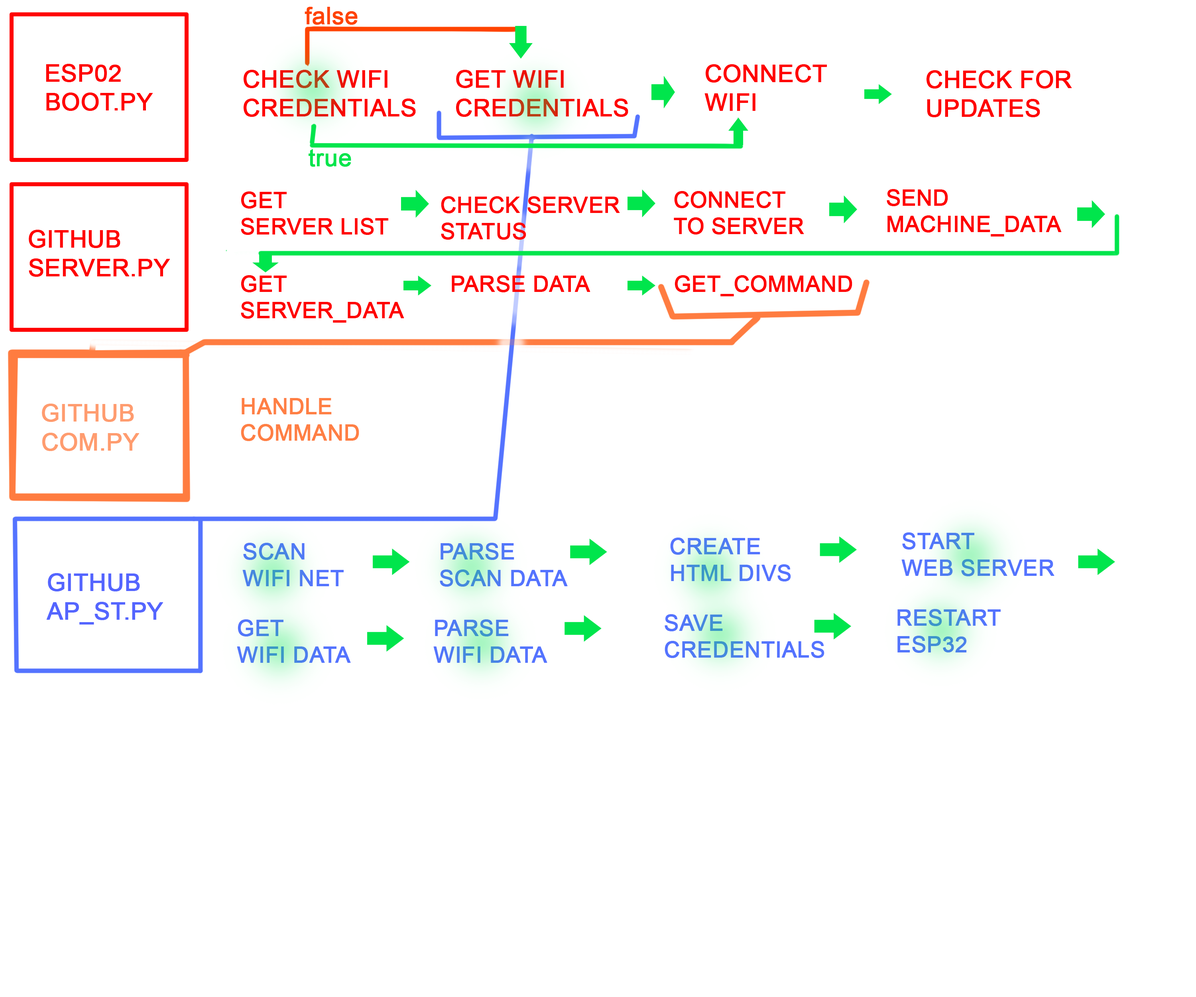
<style>
.page{position:relative;width:1196px;height:997px;background:#ffffff}
.page>*{position:absolute;margin:0}
.t1{font:23.9px "ArialMT";color:#ff4300;font-weight:bold}
.t2{font:23.9px/28.7px "ArialMT";color:#ff0000;font-weight:bold}
.t3{font:23.9px "ArialMT";color:#00e54c;font-weight:bold}
.t4{font:21.9px/26.3px "ArialMT";color:#ff0000;font-weight:bold}
.t5{font:21.9px "ArialMT";color:#ff0000;font-weight:bold}
.t6{font:21.9px/26.3px "ArialMT";color:#ff7f44;font-weight:bold}
.t7{font:23.9px/28.7px "ArialMT";color:#ff9c6f;font-weight:bold}
.t8{font:22.2px/26.6px "ArialMT";color:#5473ff;font-weight:bold}
.t9{font:23.9px/28.7px "ArialMT";color:#5465ff;font-weight:bold}
</style>
<div class="page">
<p class="t1" style="left:305px;top:7px;width:53px;height:18px">false</p>
<p class="t2" style="left:46px;top:64px;width:107px;height:47px">ESP02 <br>BOOT.PY</p>
<p class="t2" style="left:705px;top:64px;width:122px;height:47px">CONNECT<br>WIFI</p>
<p class="t2" style="left:244px;top:70px;width:172px;height:47px">CHECK WIFI<br>CREDENTIALS</p>
<p class="t2" style="left:456px;top:70px;width:172px;height:47px">GET WIFI<br>CREDENTIALS</p>
<p class="t2" style="left:927px;top:70px;width:145px;height:47px">CHECK FOR<br>UPDATES</p>
<p class="t3" style="left:309px;top:149px;width:42px;height:18px">true</p>
<p class="t4" style="left:241px;top:191px;width:147px;height:44px">GET <br>SERVER LIST</p>
<p class="t4" style="left:441px;top:196px;width:179px;height:44px">CHECK SERVER<br>STATUS</p>
<p class="t4" style="left:674px;top:191px;width:130px;height:43px">CONNECT<br>TO SERVER</p>
<p class="t4" style="left:887px;top:189px;width:175px;height:47px">SEND<br>MACHINE_DATA</p>
<p class="t2" style="left:29px;top:230px;width:141px;height:47px">GITHUB<br>SERVER.PY</p>
<p class="t4" style="left:241px;top:275px;width:163px;height:48px">GET<br>SERVER_DATA</p>
<p class="t5" style="left:452px;top:275px;width:139px;height:17px">PARSE DATA</p>
<p class="t5" style="left:675px;top:275px;width:177px;height:21px">GET_COMMAND</p>
<p class="t6" style="left:241px;top:398px;width:118px;height:43px">HANDLE<br>COMMAND</p>
<p class="t7" style="left:42px;top:404px;width:97px;height:47px">GITHUB<br>COM.PY</p>
<p class="t8" style="left:902px;top:532px;width:153px;height:44px">START<br>WEB SERVER</p>
<p class="t8" style="left:242px;top:543px;width:102px;height:43px">SCAN<br>WIFI NET</p>
<p class="t8" style="left:440px;top:543px;width:128px;height:44px">PARSE<br>SCAN DATA</p>
<p class="t8" style="left:670px;top:537px;width:121px;height:44px">CREATE<br>HTML DIVS</p>
<p class="t9" style="left:46px;top:573px;width:117px;height:51px">GITHUB<br>AP_ST.PY</p>
<p class="t8" style="left:665px;top:614px;width:160px;height:44px">SAVE<br>CREDENTIALS</p>
<p class="t8" style="left:898px;top:609px;width:103px;height:44px">RESTART<br>ESP32</p>
<p class="t8" style="left:237px;top:619px;width:114px;height:44px">GET <br>WIFI DATA</p>
<p class="t8" style="left:433px;top:619px;width:114px;height:44px">PARSE<br>WIFI DATA</p>
</div>
